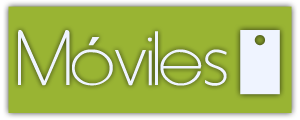
<style>
.page{position:relative;width:300px;height:120px;background:#99b433}
.page>*{position:absolute;margin:0}
.t1{font:90px "Metro-Normal";color:#eff4ff}
</style>
<div class="page">
<p class="t1" style="left:18px;top:30px;width:209px;height:56px">Móviles</p>
</div>
